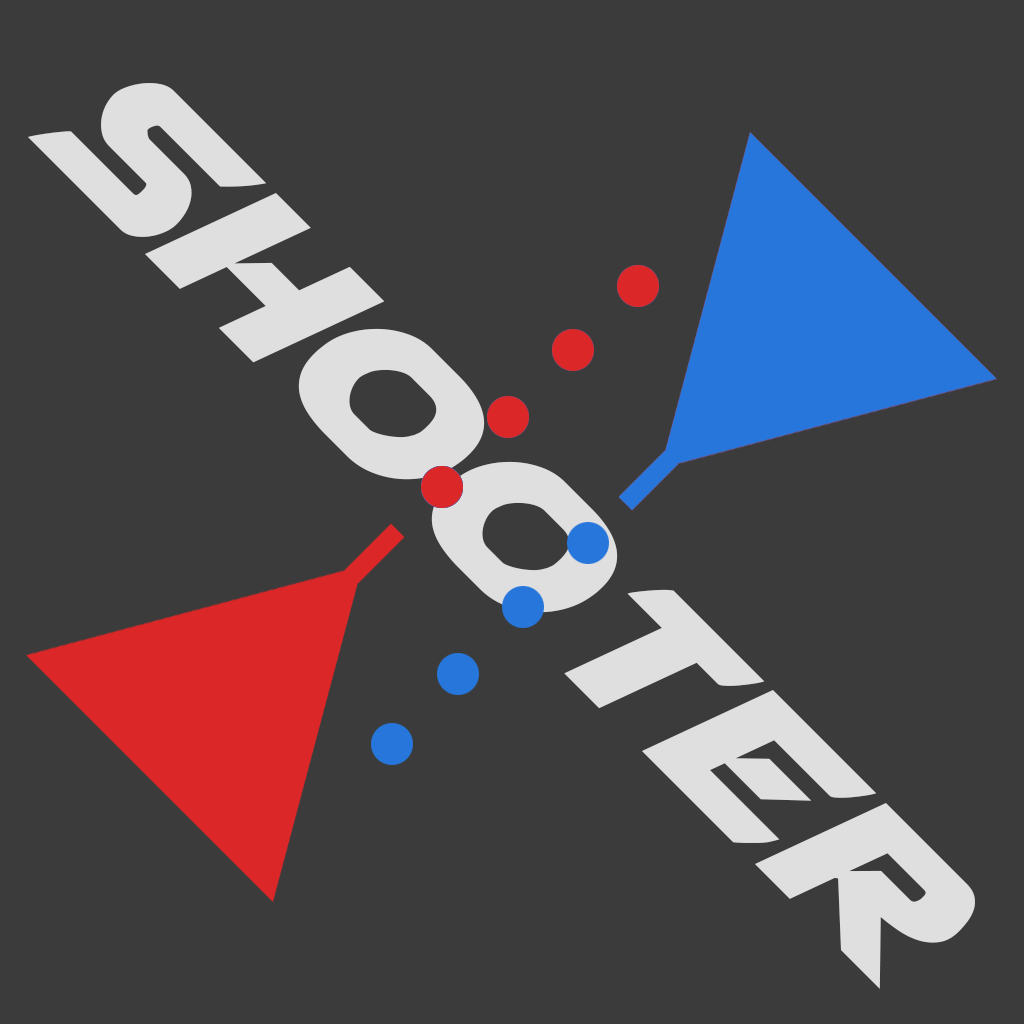
<style>
.page{position:relative;width:1024px;height:1024px;background:#3b3b3b}
.page>*{position:absolute;margin:0}
.t1{font:256px "Airstrike";color:#dfdfdf}
</style>
<div class="page">
<p class="t1" style="left:28px;top:83px;width:947px;height:906px;rotate:45deg">shooter</p>
</div>
